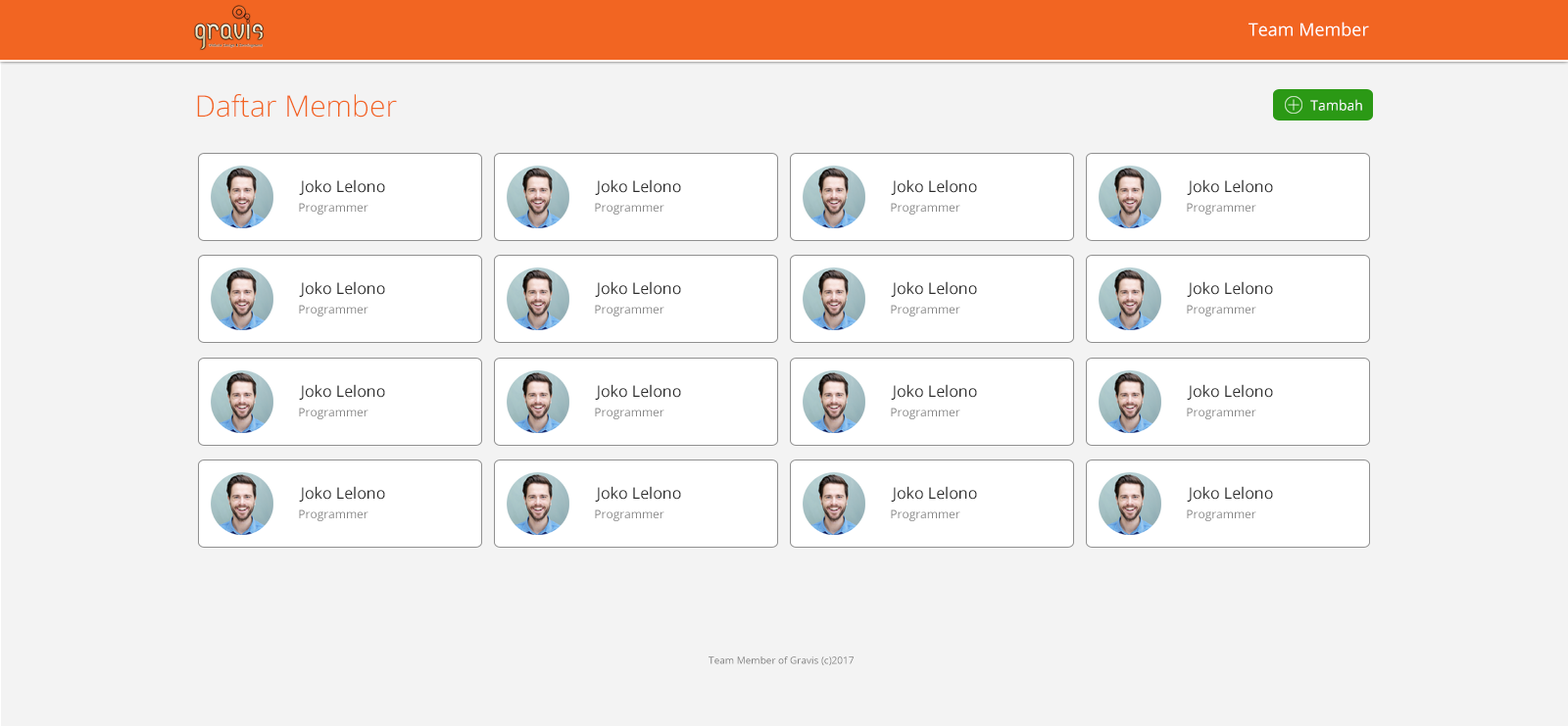
<style>
.page{position:relative;width:1568px;height:726px;background:#f3f3f3}
.page>*{position:absolute;margin:0}
.t1{font:17.6px "OpenSans";color:#ffffff}
.t2{font:29.4px "OpenSans-Light";color:#f26522}
.t3{font:13.7px "OpenSans";color:#ffffff}
.t4{font:15.7px "OpenSans";color:#2a2a2a}
.t5{font:11.8px "OpenSans";color:#868686}
.t6{font:9.8px "OpenSans";color:#7c7c7c}
</style>
<div class="page">
<p class="t1" style="left:1249px;top:22px;width:120px;height:14px">Team Member</p>
<p class="t2" style="left:197px;top:94px;width:200px;height:24px">Daftar Member</p>
<p class="t3" style="left:1310px;top:99px;width:52px;height:12px">Tambah</p>
<p class="t4" style="left:299px;top:179px;width:86px;height:16px">Joko Lelono</p>
<p class="t4" style="left:595px;top:179px;width:86px;height:16px">Joko Lelono</p>
<p class="t4" style="left:891px;top:179px;width:86px;height:16px">Joko Lelono</p>
<p class="t4" style="left:1187px;top:179px;width:86px;height:16px">Joko Lelono</p>
<p class="t5" style="left:299px;top:203px;width:69px;height:12px">Programmer</p>
<p class="t5" style="left:595px;top:203px;width:69px;height:12px">Programmer</p>
<p class="t5" style="left:891px;top:203px;width:69px;height:12px">Programmer</p>
<p class="t5" style="left:1187px;top:203px;width:69px;height:12px">Programmer</p>
<p class="t4" style="left:299px;top:281px;width:86px;height:16px">Joko Lelono</p>
<p class="t4" style="left:595px;top:281px;width:86px;height:16px">Joko Lelono</p>
<p class="t4" style="left:891px;top:281px;width:86px;height:16px">Joko Lelono</p>
<p class="t4" style="left:1187px;top:281px;width:86px;height:16px">Joko Lelono</p>
<p class="t5" style="left:299px;top:305px;width:69px;height:12px">Programmer</p>
<p class="t5" style="left:595px;top:305px;width:69px;height:12px">Programmer</p>
<p class="t5" style="left:891px;top:305px;width:69px;height:12px">Programmer</p>
<p class="t5" style="left:1187px;top:305px;width:69px;height:12px">Programmer</p>
<p class="t4" style="left:299px;top:384px;width:86px;height:16px">Joko Lelono</p>
<p class="t4" style="left:595px;top:384px;width:86px;height:16px">Joko Lelono</p>
<p class="t4" style="left:891px;top:384px;width:86px;height:16px">Joko Lelono</p>
<p class="t4" style="left:1187px;top:384px;width:86px;height:16px">Joko Lelono</p>
<p class="t5" style="left:299px;top:408px;width:69px;height:11px">Programmer</p>
<p class="t5" style="left:595px;top:408px;width:69px;height:11px">Programmer</p>
<p class="t5" style="left:891px;top:408px;width:69px;height:11px">Programmer</p>
<p class="t5" style="left:1187px;top:408px;width:69px;height:11px">Programmer</p>
<p class="t4" style="left:299px;top:486px;width:86px;height:16px">Joko Lelono</p>
<p class="t4" style="left:595px;top:486px;width:86px;height:16px">Joko Lelono</p>
<p class="t4" style="left:891px;top:486px;width:86px;height:16px">Joko Lelono</p>
<p class="t4" style="left:1187px;top:486px;width:86px;height:16px">Joko Lelono</p>
<p class="t5" style="left:299px;top:510px;width:69px;height:11px">Programmer</p>
<p class="t5" style="left:595px;top:510px;width:69px;height:11px">Programmer</p>
<p class="t5" style="left:891px;top:510px;width:69px;height:11px">Programmer</p>
<p class="t5" style="left:1187px;top:510px;width:69px;height:11px">Programmer</p>
<p class="t6" style="left:709px;top:657px;width:145px;height:8px">Team Member of Gravis (c)2017</p>
</div>
